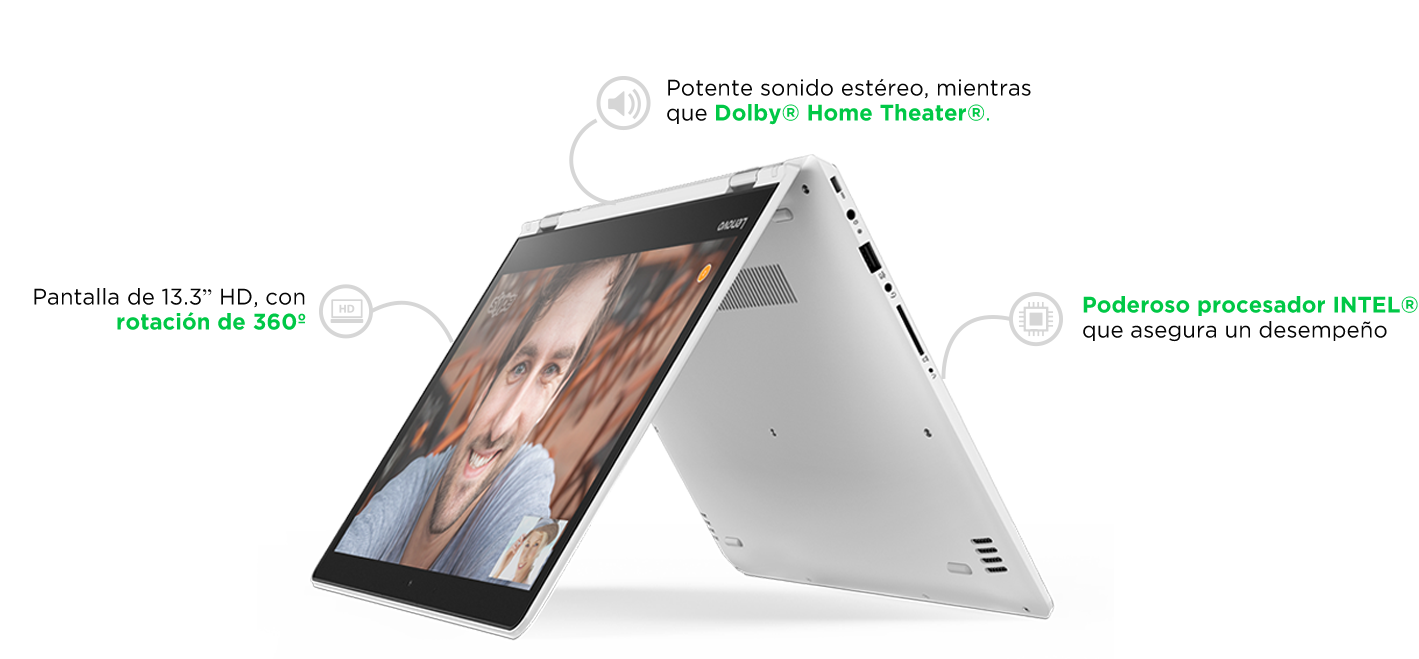
<style>
.page{position:relative;width:1419px;height:659px;background:#ffffff}
.page>*{position:absolute;margin:0}
.t1{font:22.5px/25px "GothamBook";letter-spacing:0.005em;color:#050505}
.t2{font:22.5px/25px "GothamBold";letter-spacing:0.005em;color:#00c846}
.t3{font:22.5px/25px "GothamBook";letter-spacing:0.005em;color:#00c846}
.t4{font:22.5px/25px "TimesNewRomanPSMT";letter-spacing:0.005em;color:#050505}
</style>
<div class="page">
<p class="t1" style="left:667px;top:78px;width:364px;height:47px">Potente sonido estéreo, mientras<br>que <span class="t2">Dolby® Home Theater®</span><span class="t3">.</span></p>
<p class="t1" style="left:34px;top:288px;width:272px;height:42px;text-align:right">Pantalla de 13.3<span class="t4">”</span> HD, con<br><span class="t2">rotación de 360º<br></span>impresionante.</p>
<p class="t1" style="left:1083px;top:296px;width:335px;height:46px"><span class="t2">Poderoso procesador INTEL®<br></span>que asegura un desempeño<br>impresionante.</p>
</div>
